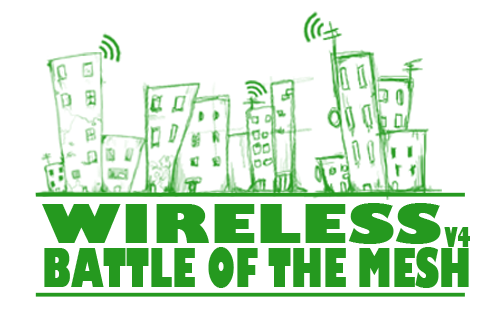
<style>
.page{position:relative;width:502px;height:332px;background:#ffffff}
.page>*{position:absolute;margin:0}
.t1{font:53px "GillSans-UltraBold";color:#25991f;text-transform:uppercase;scale:1.22 1}
.t2{font:26.6px "GillSans-UltraBold";color:#25991f;text-transform:uppercase;scale:0.59 1}
.t3{font:53px "GillSans-UltraBold";color:#25991f;text-transform:uppercase;scale:0.62 1}
</style>
<div class="page">
<p class="t1" style="left:42px;top:203px;width:399px;height:41px">WIRELESS</p>
<p class="t2" style="left:444px;top:227px;width:26px;height:20px">v4</p>
<p class="t3" style="left:44px;top:247px;width:425px;height:41px">Battle of the mesh</p>
</div>
